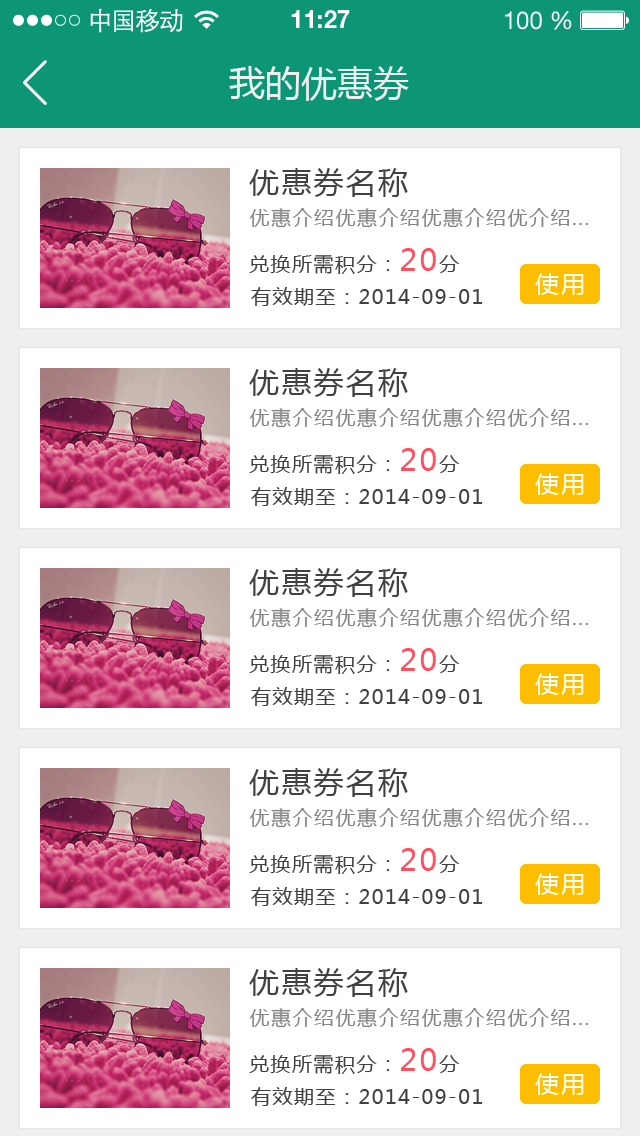
<style>
.page{position:relative;width:640px;height:1136px;background:#ffffff}
.page>*{position:absolute;margin:0}
.t1{font:25px "STXihei";letter-spacing:-0.045em;color:#fefefe}
.t2{font:24.6px "HelveticaNeueLTPro-Bd";color:#ffffff}
.t3{font:24.6px "HelveticaNeueLTStd-Roman";color:#ffffff}
.t4{font:36px "MicrosoftYaHei";color:#efefef}
.t5{font:30px "MicrosoftYaHei";letter-spacing:0.075em;color:#414141}
.t6{font:20px "MicrosoftYaHei";letter-spacing:0.075em;color:#858585}
.t7{font:20px "MicrosoftYaHei";letter-spacing:0.075em;color:#414141}
.t8{font:30px "MicrosoftYaHei";letter-spacing:0.075em;color:#ff4f61}
.t9{font:24px "MicrosoftYaHei";letter-spacing:0.075em;color:#ffffff}
</style>
<div class="page">
<p class="t1" style="left:90px;top:8px;width:93px;height:25px">中国移动</p>
<p class="t2" style="left:291px;top:10px;width:59px;height:18px">11:27</p>
<p class="t3" style="left:505px;top:11px;width:67px;height:19px">100 %</p>
<p class="t4" style="left:229px;top:66px;width:180px;height:35px">我的优惠券</p>
<p class="t5" style="left:249px;top:168px;width:159px;height:29px">优惠券名称</p>
<p class="t6" style="left:249px;top:208px;width:340px;height:20px">优惠介绍优惠介绍优惠介绍优介绍...</p>
<p class="t7" style="left:249px;top:248px;width:211px;height:26px">兑换所需积分：<span class="t8">20</span>分</p>
<p class="t9" style="left:535px;top:273px;width:49px;height:22px">使用</p>
<p class="t7" style="left:251px;top:287px;width:232px;height:19px">有效期至：2014-09-01</p>
<p class="t5" style="left:249px;top:368px;width:159px;height:29px">优惠券名称</p>
<p class="t6" style="left:249px;top:408px;width:340px;height:20px">优惠介绍优惠介绍优惠介绍优介绍...</p>
<p class="t7" style="left:249px;top:448px;width:211px;height:26px">兑换所需积分：<span class="t8">20</span>分</p>
<p class="t9" style="left:535px;top:473px;width:49px;height:22px">使用</p>
<p class="t7" style="left:251px;top:487px;width:232px;height:19px">有效期至：2014-09-01</p>
<p class="t5" style="left:249px;top:568px;width:159px;height:29px">优惠券名称</p>
<p class="t6" style="left:249px;top:608px;width:340px;height:20px">优惠介绍优惠介绍优惠介绍优介绍...</p>
<p class="t7" style="left:249px;top:648px;width:211px;height:26px">兑换所需积分：<span class="t8">20</span>分</p>
<p class="t9" style="left:535px;top:673px;width:49px;height:22px">使用</p>
<p class="t7" style="left:251px;top:687px;width:232px;height:19px">有效期至：2014-09-01</p>
<p class="t5" style="left:249px;top:768px;width:159px;height:29px">优惠券名称</p>
<p class="t6" style="left:249px;top:808px;width:340px;height:20px">优惠介绍优惠介绍优惠介绍优介绍...</p>
<p class="t7" style="left:249px;top:848px;width:211px;height:26px">兑换所需积分：<span class="t8">20</span>分</p>
<p class="t9" style="left:535px;top:873px;width:49px;height:22px">使用</p>
<p class="t7" style="left:251px;top:887px;width:232px;height:19px">有效期至：2014-09-01</p>
<p class="t5" style="left:249px;top:968px;width:159px;height:29px">优惠券名称</p>
<p class="t6" style="left:249px;top:1008px;width:340px;height:20px">优惠介绍优惠介绍优惠介绍优介绍...</p>
<p class="t7" style="left:249px;top:1048px;width:211px;height:26px">兑换所需积分：<span class="t8">20</span>分</p>
<p class="t9" style="left:535px;top:1073px;width:49px;height:22px">使用</p>
<p class="t7" style="left:251px;top:1087px;width:232px;height:19px">有效期至：2014-09-01</p>
</div>
